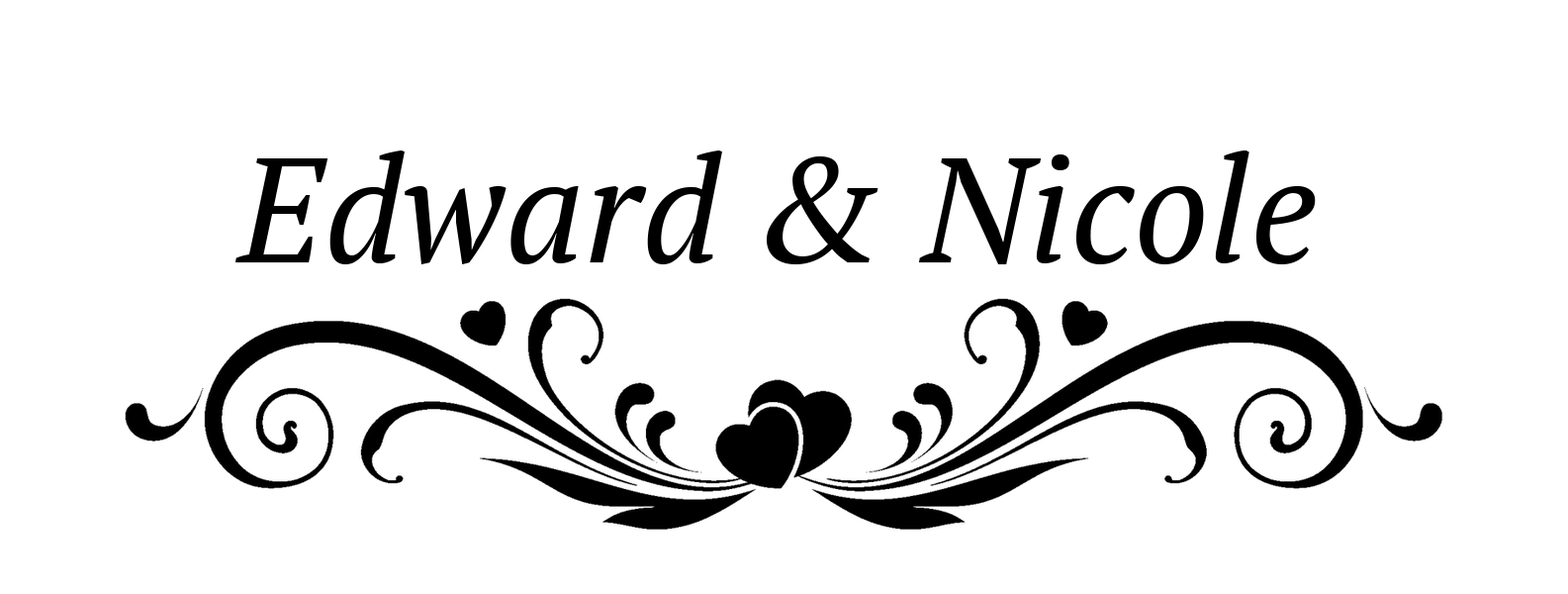
<style>
.page{position:relative;width:1568px;height:594px;background:#ffffff}
.page>*{position:absolute;margin:0}
.t1{font:148.4px "PTSerif-Italic";color:#000000}
</style>
<div class="page">
<p class="t1" style="left:235px;top:150px;width:1081px;height:114px">Edward &amp; Nicole</p>
</div>
